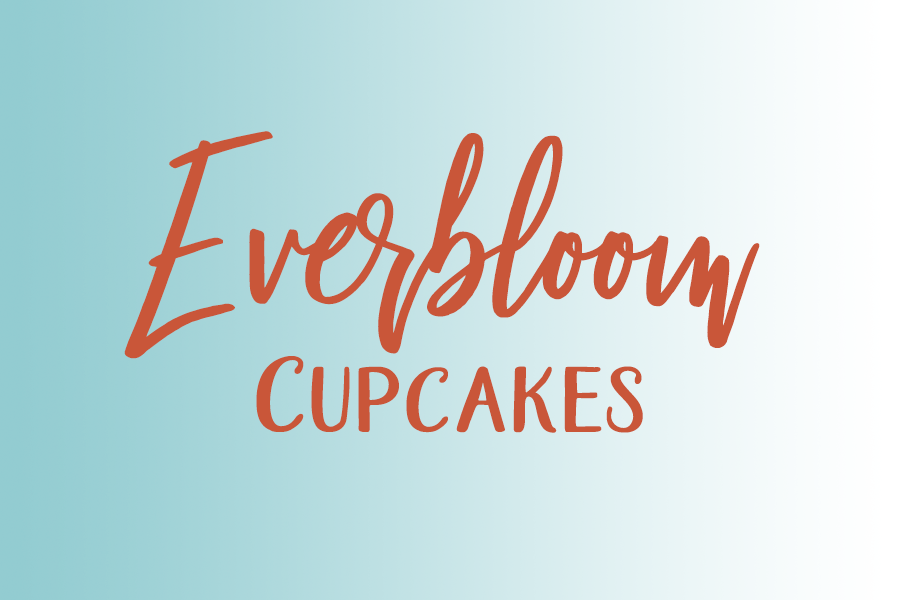
<style>
.page{position:relative;width:900px;height:600px}
.page>*{position:absolute;margin:0}
.t1{font:250px "BeautifulBloom-Regular";color:#c95639}
.t2{font:125px "Blishfully-Sans";color:#c95639}
</style>
<div class="page">
<p class="t1" style="left:124px;top:131px;width:636px;height:228px">Everbloom</p>
<p class="t2" style="left:256px;top:356px;width:387px;height:77px">Cupcakes</p>
</div>
